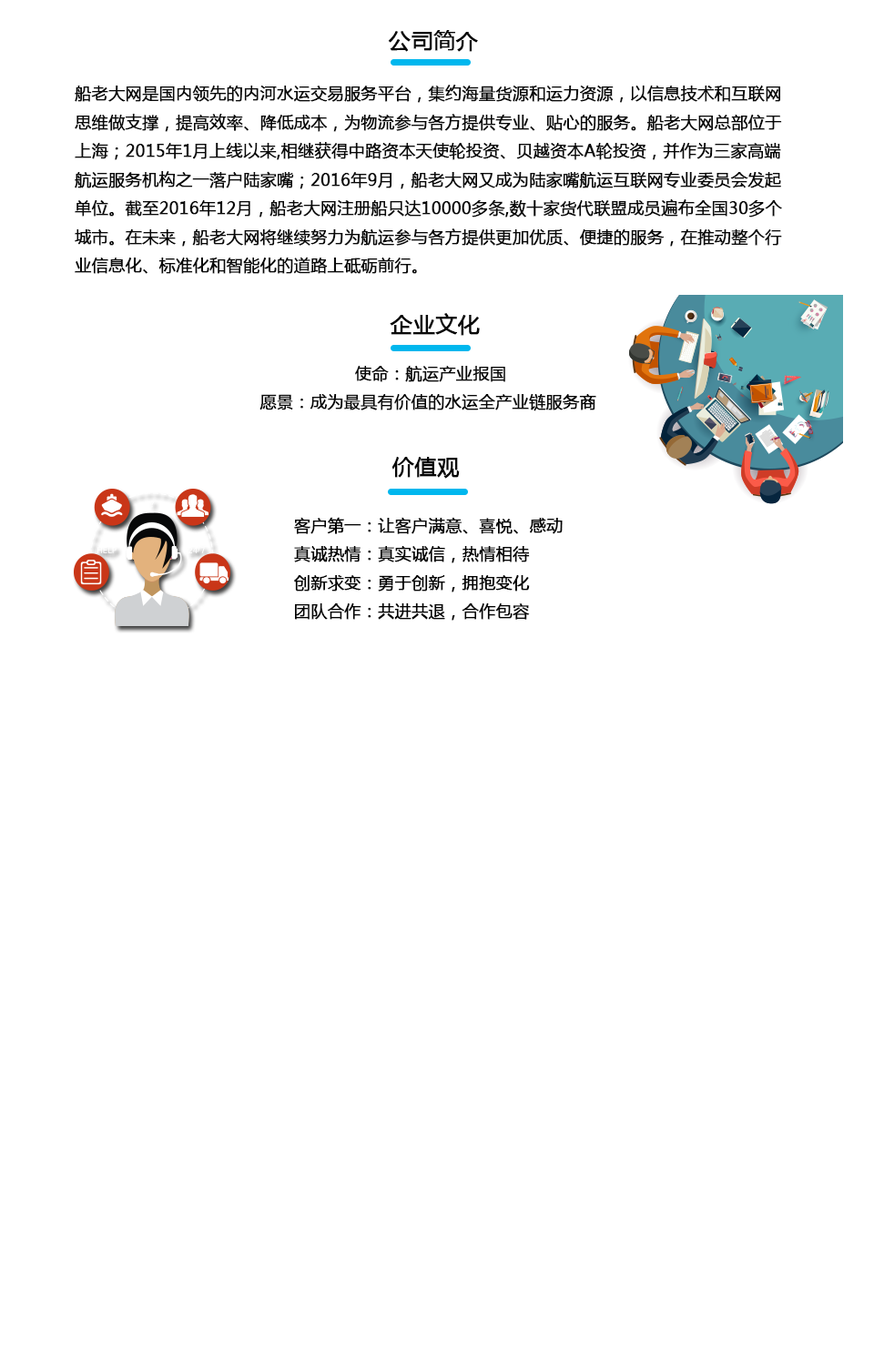
<style>
.page{position:relative;width:874px;height:1365px;background:#ffffff}
.page>*{position:absolute;margin:0}
.t1{font:21.8px "MicrosoftYaHei";color:#080808;font-weight:bold}
.t2{font:16.4px "MicrosoftYaHei";color:#080808;font-weight:bold}
.t3{font:16.4px "MicrosoftYaHei";color:#060606;font-weight:bold}
.t4{font:21.8px "MicrosoftYaHei";color:#040404;font-weight:bold}
.t5{font:16.4px "MicrosoftYaHei";color:#020202;font-weight:bold}
</style>
<div class="page">
<p class="t1" style="left:388px;top:30px;width:90px;height:22px">公司简介</p>
<p class="t2" style="left:75px;top:85px;width:707px;height:189px">船老大网是国内领先的内河水运交易服务平台，集约海量货源和运力资源，以信息技术和互联网<br>思维做支撑，提高效率、降低成本，为物流参与各方提供专业、贴心的服务。船老大网总部位于<br>上海；2015年1月上线以来,相继获得中路资本天使轮投资、贝越资本A轮投资，并作为三家高端<br>航运服务机构之一落户陆家嘴；2016年9月，船老大网又成为陆家嘴航运互联网专业委员会发起<br>单位。截至2016年12月，船老大网注册船只达10000多条,数十家货代联盟成员遍布全国30多个<br>城市。在未来，船老大网将继续努力为航运参与各方提供更加优质、便捷的服务，在推动整个行<br>业信息化、标准化和智能化的道路上砥砺前行。</p>
<p class="t1" style="left:389px;top:313px;width:91px;height:23px">企业文化</p>
<p class="t3" style="left:259px;top:366px;width:337px;height:45px"><span class="t2">                  </span>使命：航运产业报国<br>愿景：成为最具有价值的水运全产业链服务商</p>
<p class="t4" style="left:391px;top:457px;width:69px;height:22px">价值观</p>
<p class="t5" style="left:294px;top:517px;width:268px;height:104px">客户第一：让客户满意、喜悦、感动<br>真诚热情：真实诚信，热情相待<br>创新求变：勇于创新，拥抱变化<br>团队合作：共进共退，合作包容</p>
</div>
